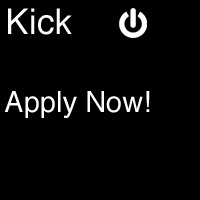
<style>
.page{position:relative;width:200px;height:200px;background:#000000}
.page>*{position:absolute;margin:0}
.t1{font:35.3px "Helvetica";color:#ffffff}
.t2{font:29px "Helvetica";color:#ffffff}
</style>
<div class="page">
<p class="t1" style="left:8px;top:8px;width:64px;height:27px">Kick</p>
<p class="t2" style="left:4px;top:91px;width:146px;height:27px">Apply Now!</p>
</div>
